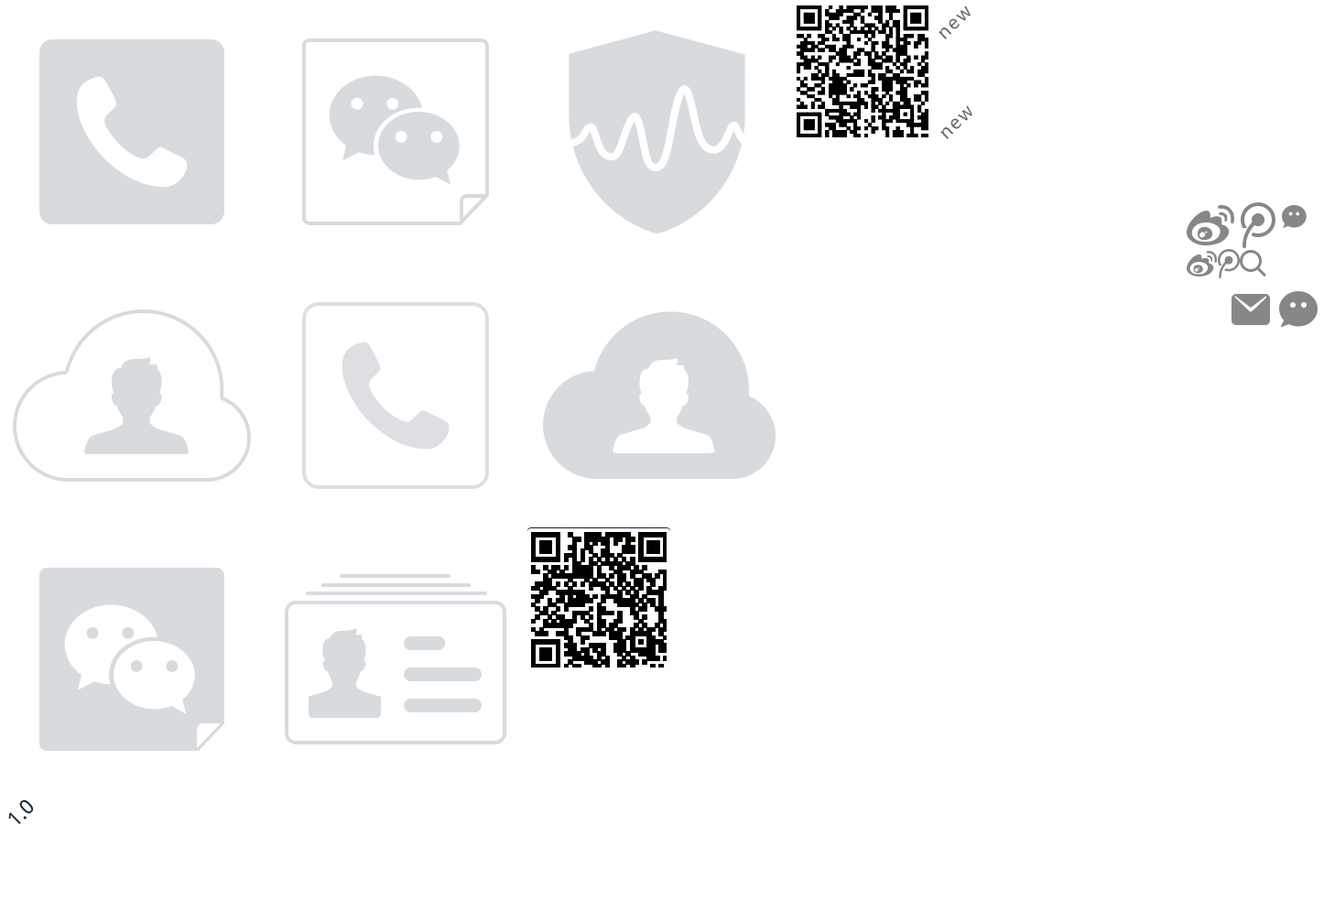
<style>
.page{position:relative;width:1324px;height:901px;background:#ffffff}
.page>*{position:absolute;margin:0}
.t1{font:18.3px "MicrosoftYaHei";letter-spacing:0.1em;color:#676767}
</style>
<div class="page">
<p class="t1" style="left:938px;top:5px;width:32px;height:34px;rotate:-44deg">new</p>
<p class="t1" style="left:940px;top:105px;width:32px;height:34px;rotate:-44deg">new</p>
</div>
